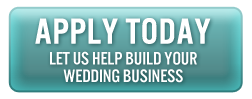
<style>
.page{position:relative;width:252px;height:99px;background:#ffffff}
.page>*{position:absolute;margin:0}
.t1{font:18.6px/12.9px "U.S.101";color:#ffffff}
.t2{font:37.3px/39.3px "U.S.101";color:#ffffff;text-transform:uppercase;font-weight:bold}
.t3{font:18.6px/17.5px "U.S.101";color:#ffffff}
</style>
<div class="page">
<p class="t1" style="left:35px;top:18px;width:176px;height:65px;text-align:center"><span class="t2">Apply Today<br><br></span>Let Us Help Build Your<br><span class="t3">Wedding Business</span></p>
</div>
